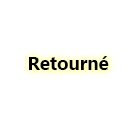
<style>
.page{position:relative;width:134px;height:134px;background:#ffffff}
.page>*{position:absolute;margin:0}
.t1{font:18.7px "LaoUI-Bold";color:#000000}
</style>
<div class="page">
<p class="t1" style="left:29px;top:56px;width:80px;height:14px">Retourné</p>
</div>
